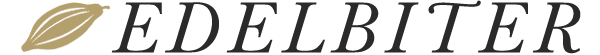
<style>
.page{position:relative;width:600px;height:55px;background:#ffffff}
.page>*{position:absolute;margin:0}
.t1{font:75px "Baskerville-Italic";letter-spacing:0.12em;color:#2a2a2a;font-variant:small-caps}
</style>
<div class="page">
<p class="t1" style="left:111px;top:0px;width:470px;height:54px">EDELBITER</p>
</div>
